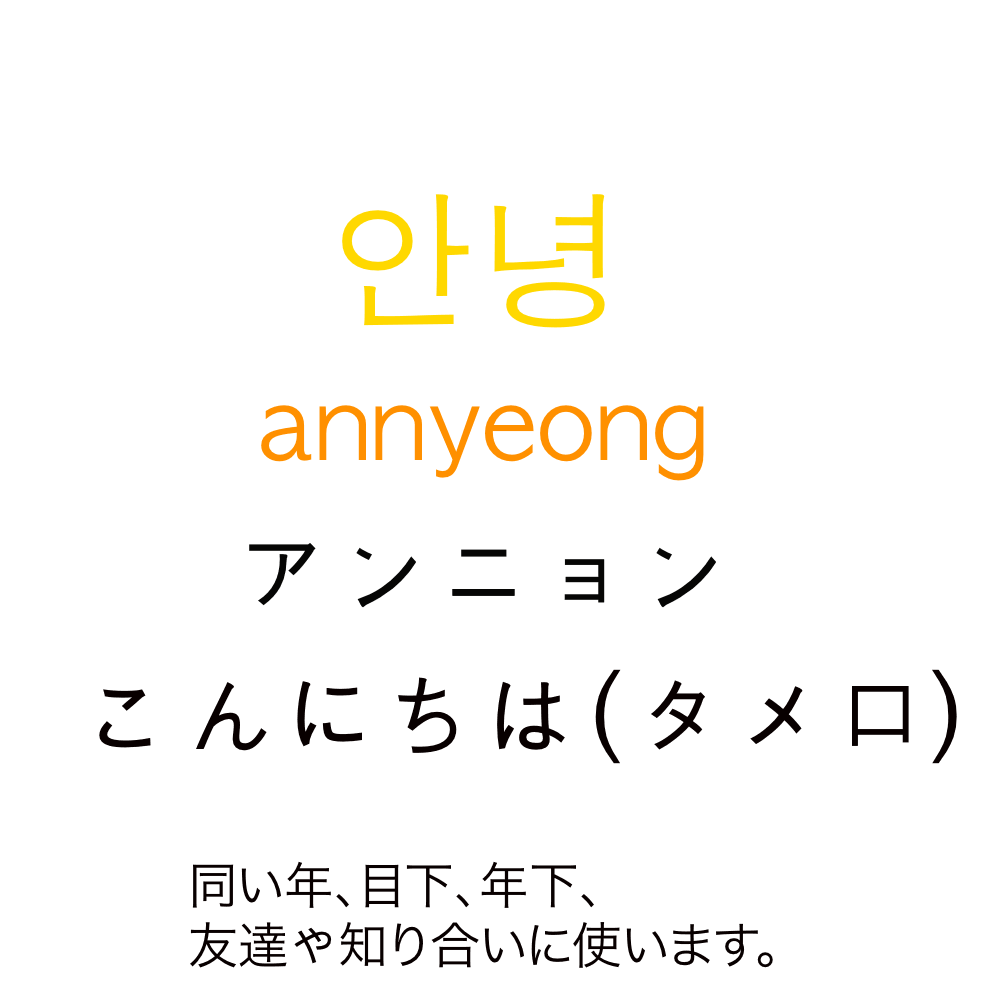
<style>
.page{position:relative;width:1000px;height:1000px;background:#ffffff}
.page>*{position:absolute;margin:0}
.t1{font:150px "AppleGothic";color:#ffd800}
.t2{font:100px "AppleGothic";color:#ff9000}
.t3{font:100px "AppleGothic";color:#060605}
.t4{font:100px "AppleGothic";color:#080000}
.t5{font:50px "HiraKakuProN-W3";color:#080000}
.t6{font:50px "AppleGothic";color:#080000}
</style>
<div class="page">
<p class="t1" style="left:342px;top:194px;width:263px;height:134px">안녕</p>
<p class="t2" style="left:261px;top:405px;width:443px;height:76px">annyeong</p>
<p class="t3" style="left:249px;top:543px;width:467px;height:65px">アンニョン</p>
<p class="t4" style="left:99px;top:669px;width:858px;height:95px">こんにちは(タメ口）</p>
<p class="t5" style="left:190px;top:861px;width:583px;height:107px">同い年、目下、年下、<br>友達<span class="t6">や</span>知り合いに使います。</p>
</div>
